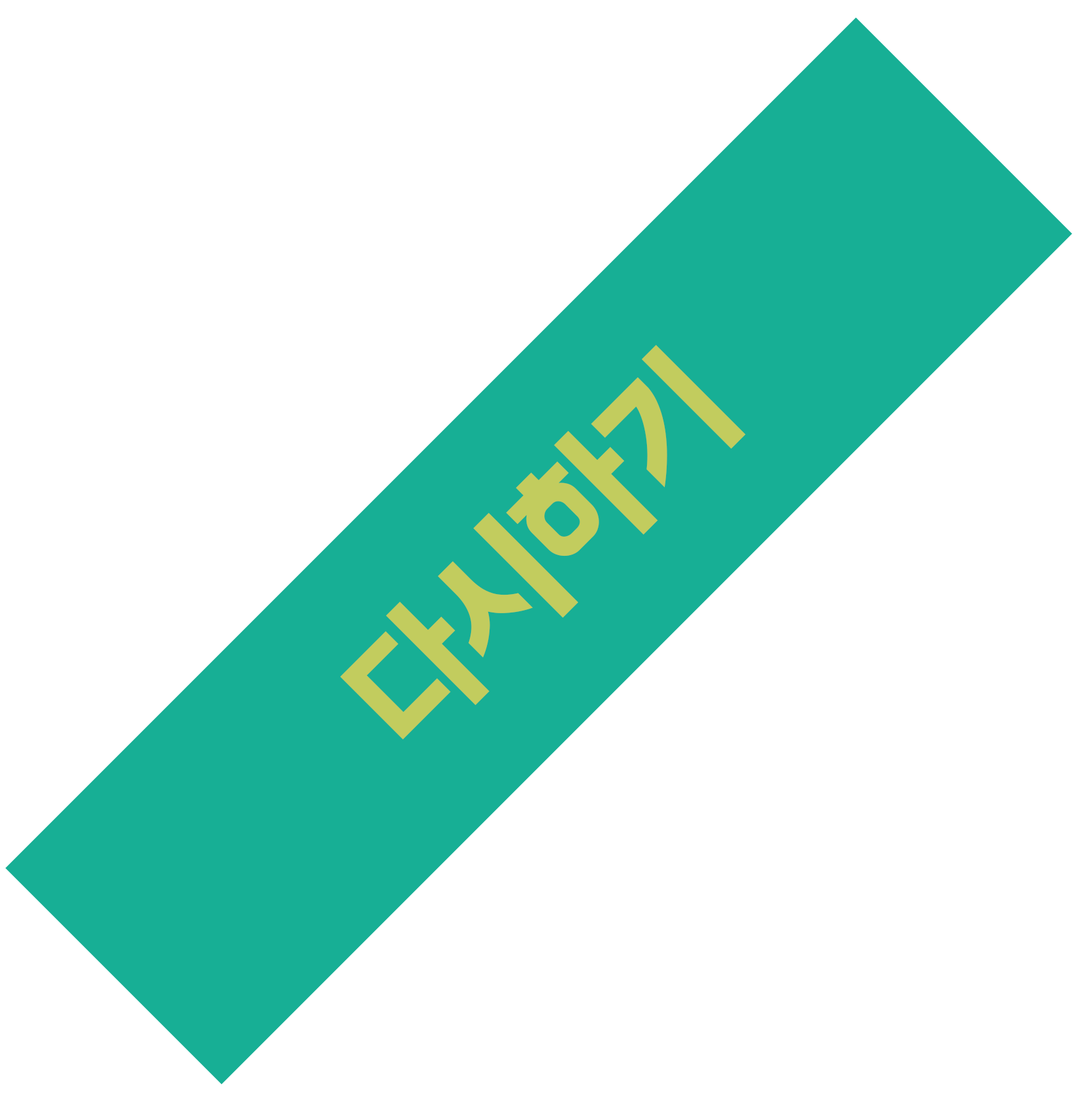
<style>
.page{position:relative;width:1081px;height:1104px;background:#ffffff}
.page>*{position:absolute;margin:0}
.t1{font:152.1px "BMHANNA11yrsold";letter-spacing:-0.04em;color:#c2cc5e}
</style>
<div class="page">
<p class="t1" style="left:340px;top:345px;width:405px;height:394px;rotate:-45deg">다시하기</p>
</div>
